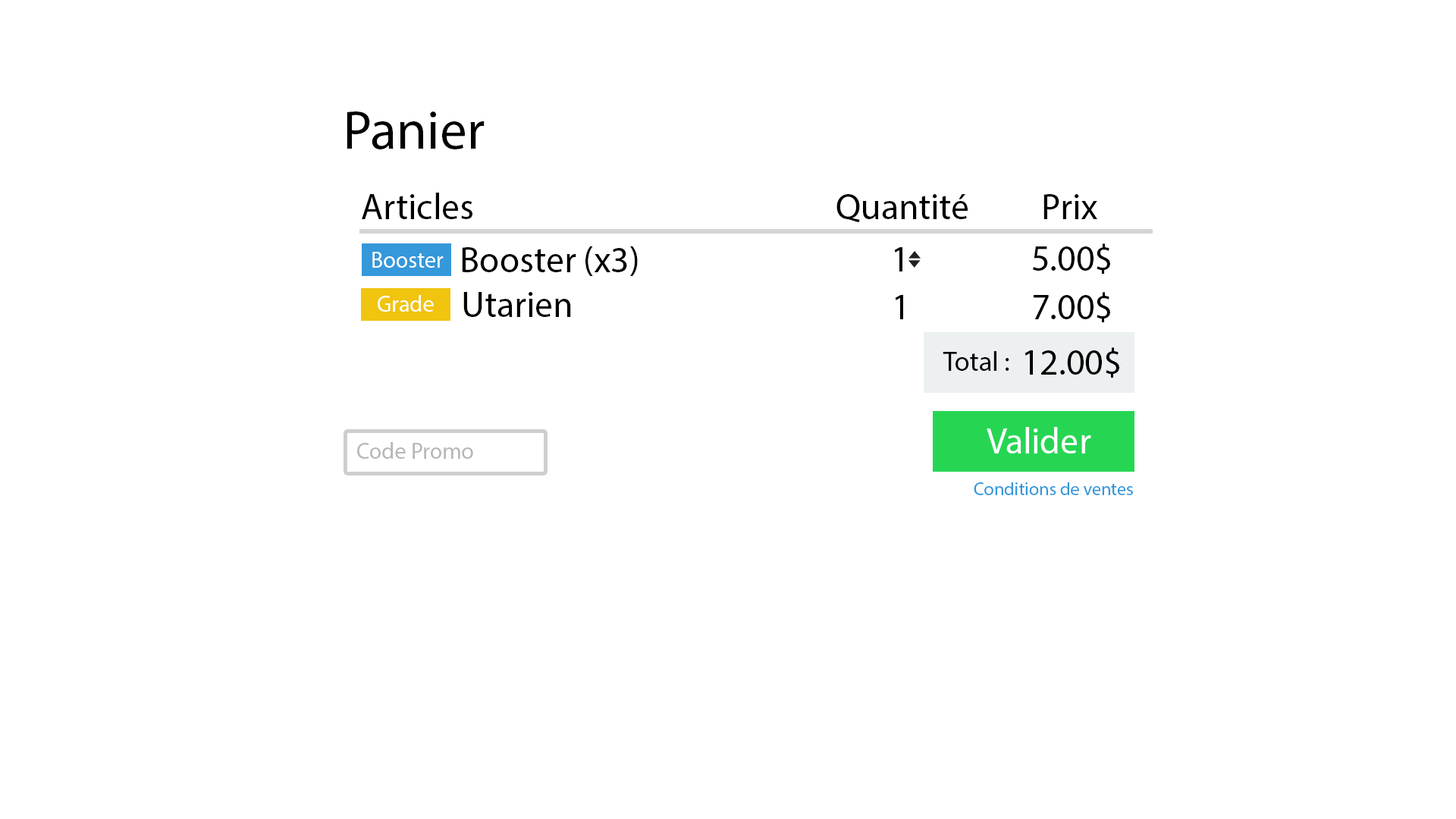
<style>
.page{position:relative;width:1456px;height:819px;background:#ffffff}
.page>*{position:absolute;margin:0}
.t1{font:54.6px "MyriadPro-Regular";color:#000000}
.t2{font:36.4px "MyriadPro-Regular";color:#000000}
.t3{font:22.7px "MyriadPro-Regular";color:#ffffff}
.t4{font:27.3px "MyriadPro-Regular";color:#000000}
.t5{font:36.4px "MyriadPro-Regular";color:#ffffff}
.t6{font:22.7px "MyriadPro-Regular";color:#b7b7b7}
.t7{font:18.2px "MyriadPro-Regular";color:#3498db}
</style>
<div class="page">
<p class="t1" style="left:347px;top:111px;width:138px;height:38px">Panier</p>
<p class="t2" style="left:362px;top:193px;width:110px;height:26px">Articles</p>
<p class="t2" style="left:836px;top:194px;width:132px;height:29px">Quantité</p>
<p class="t2" style="left:1043px;top:194px;width:54px;height:25px">Prix</p>
<p class="t2" style="left:462px;top:246px;width:176px;height:30px">Booster (x3)</p>
<p class="t2" style="left:1033px;top:243px;width:77px;height:31px">5.00$</p>
<p class="t3" style="left:372px;top:252px;width:72px;height:16px">Booster</p>
<p class="t2" style="left:894px;top:247px;width:8px;height:24px">1</p>
<p class="t2" style="left:463px;top:292px;width:108px;height:25px">Utarien</p>
<p class="t2" style="left:1034px;top:292px;width:76px;height:30px">7.00$</p>
<p class="t3" style="left:378px;top:295px;width:56px;height:17px">Grade</p>
<p class="t2" style="left:895px;top:295px;width:8px;height:24px">1</p>
<p class="t4" style="left:943px;top:351px;width:66px;height:20px">Total :</p>
<p class="t2" style="left:1024px;top:347px;width:95px;height:31px">12.00$</p>
<p class="t5" style="left:987px;top:427px;width:104px;height:26px">Valider</p>
<p class="t6" style="left:357px;top:442px;width:116px;height:17px">Code Promo</p>
<p class="t7" style="left:974px;top:482px;width:159px;height:13px">Conditions de ventes</p>
</div>
